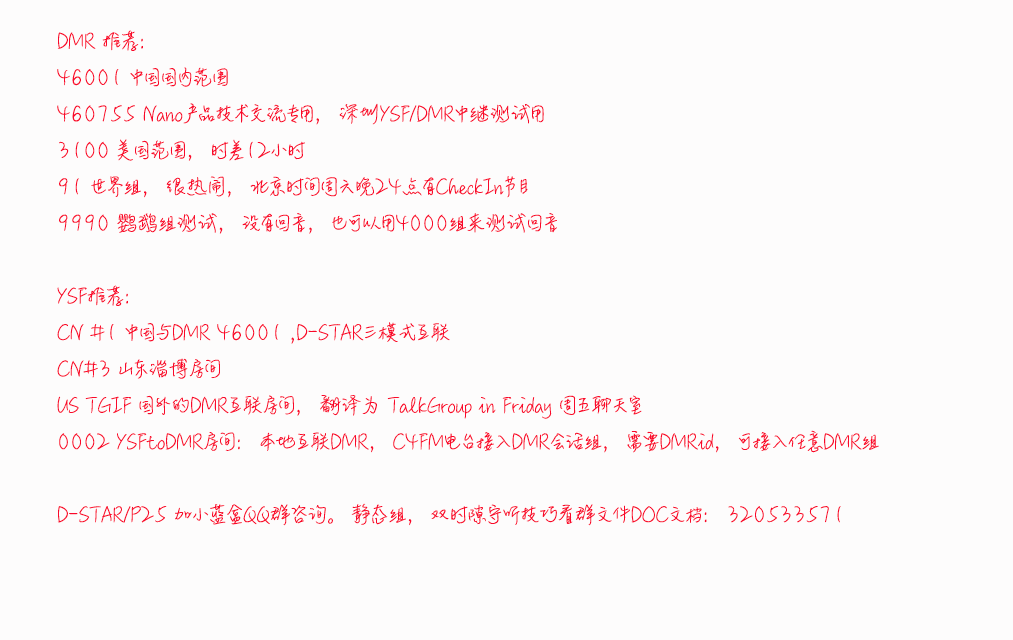
<style>
.page{position:relative;width:1013px;height:640px;background:#fdfcfc}
.page>*{position:absolute;margin:0}
.t1{font:24px "MLingWaiMedium-SC";color:#fa082a}
</style>
<div class="page">
<p class="t1" style="left:57px;top:30px;width:822px;height:496px">DMR 推荐：<br>46001 中国国内范围<br>460755 Nano产品技术交流专用，深圳YSF/DMR中继测试用<br>3100 美国范围，时差12小时<br>91 世界组，很热闹，北京时间周六晚24点有CheckIn节目<br>9990 鹦鹉组测试，没有回音，也可以用4000组来测试回音<br><br>YSF推荐：<br>CN #1 中国与DMR 46001 ,D-STAR三模式互联<br>CN#3 山东淄博房间<br>US TGIF 国外的DMR互联房间，翻译为 TalkGroup in Friday 周五聊天室<br>0002 YSFtoDMR房间：本地互联DMR，C4FM电台接入DMR会话组，需要DMRid，可接入任意DMR组<br><br>D-STAR/P25 加小蓝盒QQ群咨询。静态组，双时隙守听技巧看群文件DOC文档：320533571</p>
</div>
